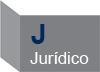
<style>
.page{position:relative;width:100px;height:72px;background:#7f8084}
.page>*{position:absolute;margin:0}
.t1{font:27.8px "Arial-BoldMT";color:#00285e}
.t2{font:16.7px "ArialMT";color:#fcfcfd}
</style>
<div class="page">
<p class="t1" style="left:31px;top:24px;width:14px;height:20px">J</p>
<p class="t2" style="left:30px;top:52px;width:59px;height:12px">Jurídico</p>
</div>
